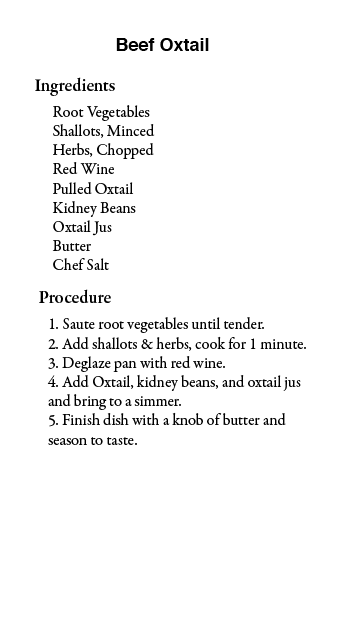
<style>
.page{position:relative;width:360px;height:640px;background:#ffffff}
.page>*{position:absolute;margin:0}
.t1{font:18px "Helvetica-Bold";color:#000000}
.t2{font:18px "GaramondPremrPro-Smbd";color:#000000}
.t3{font:16px "GaramondPremrPro";color:#000000}
</style>
<div class="page">
<p class="t1" style="left:116px;top:38px;width:93px;height:13px">Beef Oxtail</p>
<p class="t2" style="left:35px;top:77px;width:80px;height:19px">Ingredients</p>
<p class="t3" style="left:52px;top:105px;width:103px;height:165px">Root Vegetables<br>Shallots, Minced<br>Herbs, Chopped<br>Red Wine<br>Pulled Oxtail<br>Kidney Beans<br>Oxtail Jus<br>Butter<br>Chef Salt</p>
<p class="t2" style="left:39px;top:289px;width:72px;height:14px">Procedure</p>
<p class="t3" style="left:47px;top:317px;width:259px;height:128px">1. Saute root vegetables until tender.<br>2. Add shallots &amp; herbs, cook for 1 minute.<br>3. Deglaze pan with red wine.<br>4. Add Oxtail, kidney beans, and oxtail jus and bring to a simmer.<br>5. Finish dish with a knob of butter and season to taste.</p>
</div>
